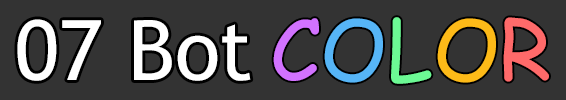
<style>
.page{position:relative;width:566px;height:100px;background:#333333}
.page>*{position:absolute;margin:0}
.t1{font:83.3px "ComicSansMS";color:#d272ff}
.t2{font:83.3px "ComicSansMS";color:#56b5f7}
.t3{font:83.3px "ComicSansMS";color:#6cf994}
.t4{font:83.3px "ComicSansMS";color:#fdba18}
.t5{font:83.3px "ComicSansMS";color:#ff6a6a}
.t6{font:83.3px "TrebuchetMS";color:#ffffff}
</style>
<div class="page">
<p class="t1" style="left:273px;top:17px;width:276px;height:67px">C<span class="t2">O</span><span class="t3">L</span><span class="t4">O</span><span class="t5">R</span></p>
<p class="t6" style="left:17px;top:19px;width:234px;height:62px">07 Bot</p>
</div>
